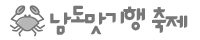
<style>
.page{position:relative;width:200px;height:40px;background:#ffffff}
.page>*{position:absolute;margin:0}
.t1{font:35px "icTTBaramddaraB";letter-spacing:-0.1em;color:#777777}
</style>
<div class="page">
<p class="t1" style="left:50px;top:5px;width:138px;height:30px">남도맛기행 축제</p>
</div>
